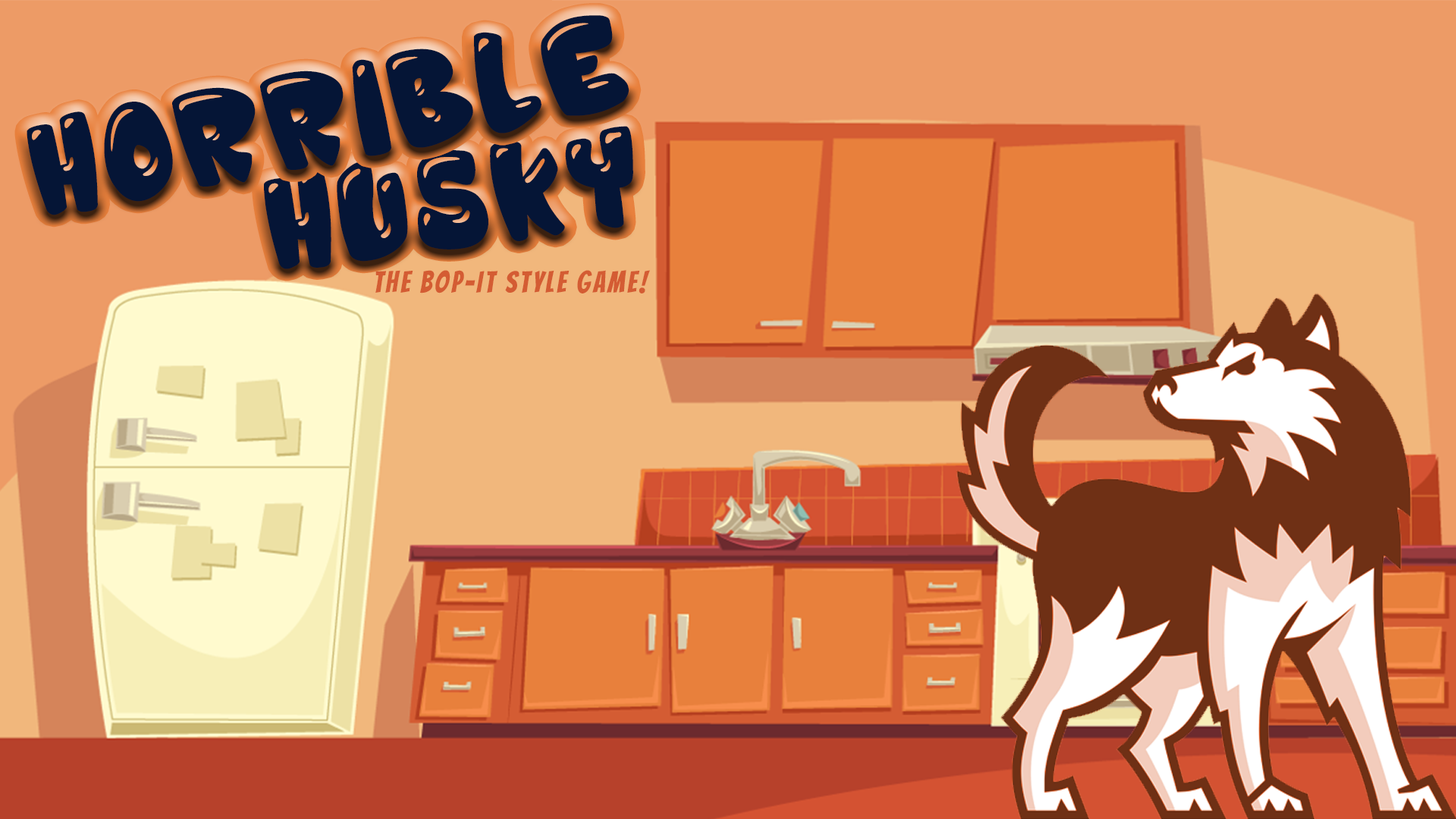
<style>
.page{position:relative;width:1456px;height:819px}
.page>*{position:absolute;margin:0}
.t1{font:60.1px "JellyCrazies";letter-spacing:0.1em;color:#051536;text-transform:uppercase;scale:0.91 1}
.t2{font:30px "Bangers-Regular";letter-spacing:0.1em;color:#d45c33;text-transform:uppercase;scale:0.91 1}
</style>
<div class="page">
<p class="t1" style="left:27px;top:15px;width:602px;height:200px;rotate:-11deg">horrible</p>
<p class="t1" style="left:264px;top:126px;width:369px;height:143px;rotate:-8deg">husky</p>
<p class="t2" style="left:375px;top:270px;width:275px;height:23px">the bop-it style game!</p>
</div>
